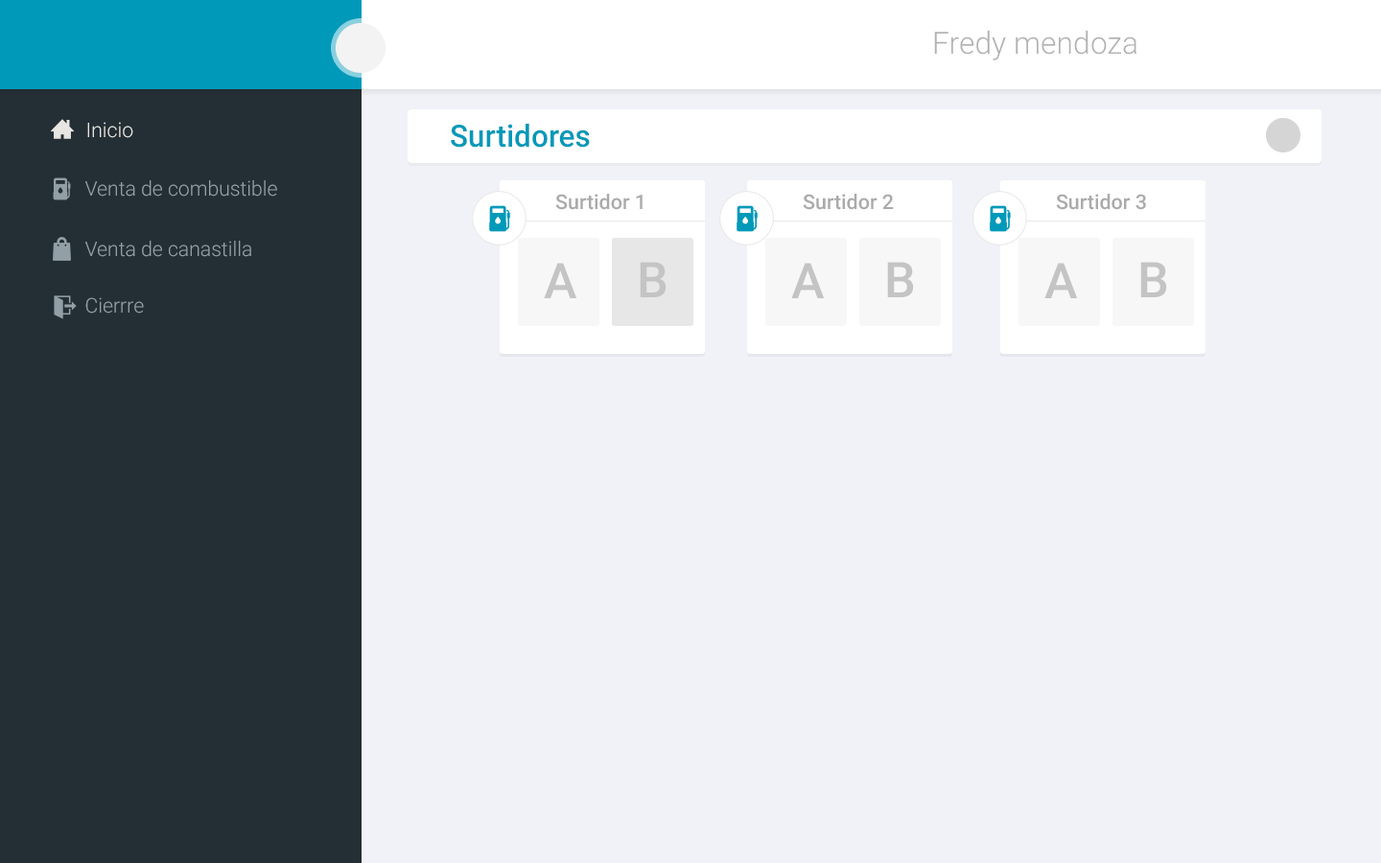
<style>
.page{position:relative;width:1381px;height:863px;background:#f1f2f7}
.page>*{position:absolute;margin:0}
.t1{font:30.7px "Roboto-Light";color:#b4b1b1}
.t2{font:20.3px "Roboto-Light";color:#e8e6e2}
.t3{font:30.7px "Roboto-Medium";color:#0099b9}
.t4{font:20.3px "Roboto-Light";color:#939fa7}
.t5{font:20.4px "Roboto-Medium";color:#aaaaaa}
.t6{font:49.5px "Roboto-Medium";color:#c4c4c4}
</style>
<div class="page">
<p class="t1" style="left:934px;top:31px;width:203px;height:29px">Fredy mendoza</p>
<p class="t2" style="left:87px;top:122px;width:46px;height:16px">Inicio</p>
<p class="t3" style="left:451px;top:124px;width:139px;height:24px">Surtidores</p>
<p class="t4" style="left:85px;top:180px;width:192px;height:17px">Venta de combustible</p>
<p class="t5" style="left:555px;top:194px;width:88px;height:16px">Surtidor 1</p>
<p class="t5" style="left:803px;top:194px;width:91px;height:16px">Surtidor 2</p>
<p class="t5" style="left:1056px;top:194px;width:90px;height:16px">Surtidor 3</p>
<p class="t4" style="left:85px;top:241px;width:166px;height:16px">Venta de canastilla</p>
<p class="t6" style="left:544px;top:263px;width:33px;height:35px">A</p>
<p class="t6" style="left:640px;top:262px;width:27px;height:35px">B</p>
<p class="t6" style="left:791px;top:263px;width:34px;height:35px">A</p>
<p class="t6" style="left:887px;top:262px;width:27px;height:35px">B</p>
<p class="t6" style="left:1045px;top:263px;width:33px;height:35px">A</p>
<p class="t6" style="left:1141px;top:262px;width:26px;height:35px">B</p>
<p class="t4" style="left:85px;top:297px;width:59px;height:17px">Cierrre</p>
</div>
